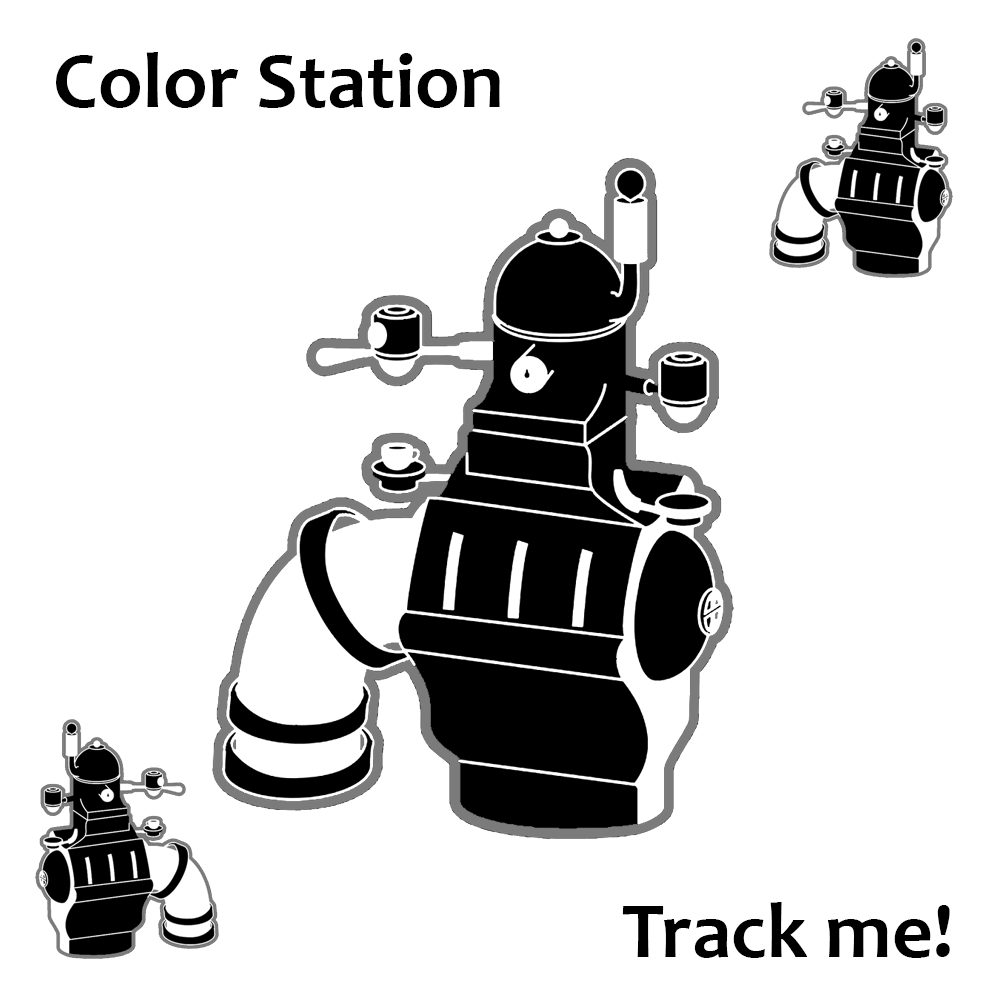
<style>
.page{position:relative;width:997px;height:997px;background:#ffffff}
.page>*{position:absolute;margin:0}
.t1{font:80px "Candara-Bold";color:#000000}
</style>
<div class="page">
<p class="t1" style="left:56px;top:52px;width:444px;height:56px">Color Station</p>
<p class="t1" style="left:622px;top:902px;width:328px;height:56px">Track me!</p>
</div>
